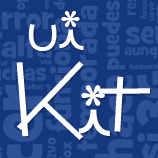
<style>
.page{position:relative;width:158px;height:158px;background:#14377e}
.page>*{position:absolute;margin:0}
.t1{font:72px "Rickles";letter-spacing:-0.01em;color:#ffffff}
.t2{font:93.3px "Rickles";letter-spacing:-0.01em;color:#ffffff}
</style>
<div class="page">
<p class="t1" style="left:28px;top:11px;width:56px;height:40px">ui</p>
<p class="t2" style="left:16px;top:61px;width:134px;height:79px">Kit</p>
</div>
